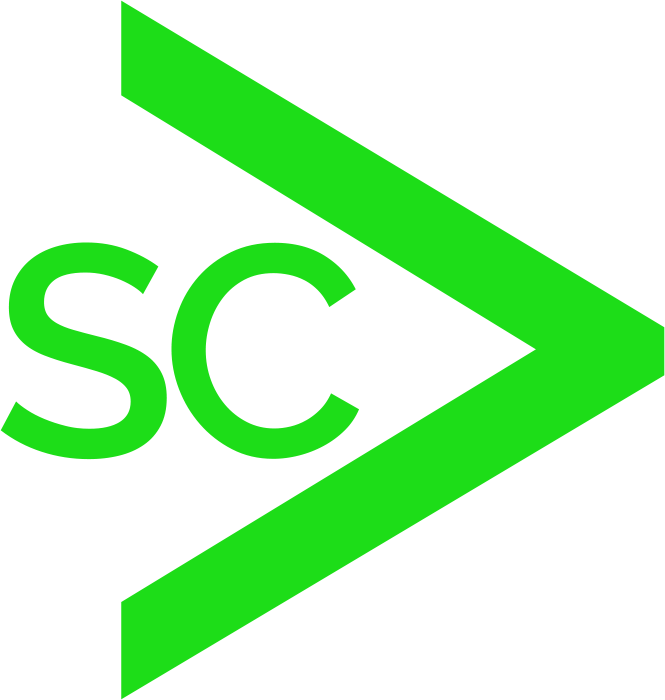
<style>
.page{position:relative;width:665px;height:700px;background:#ffffff}
.page>*{position:absolute;margin:0}
.t1{font:1296px "Raleway-Regular";letter-spacing:0.05em;color:#1ddd18}
.t2{font:300px "Raleway-SemiBold";letter-spacing:-0.05em;color:#1ddd18}
</style>
<div class="page">
<p class="t1" style="left:121px;top:0px;width:544px;height:700px">&gt;</p>
<p class="t2" style="left:0px;top:242px;width:359px;height:218px">SC</p>
</div>
